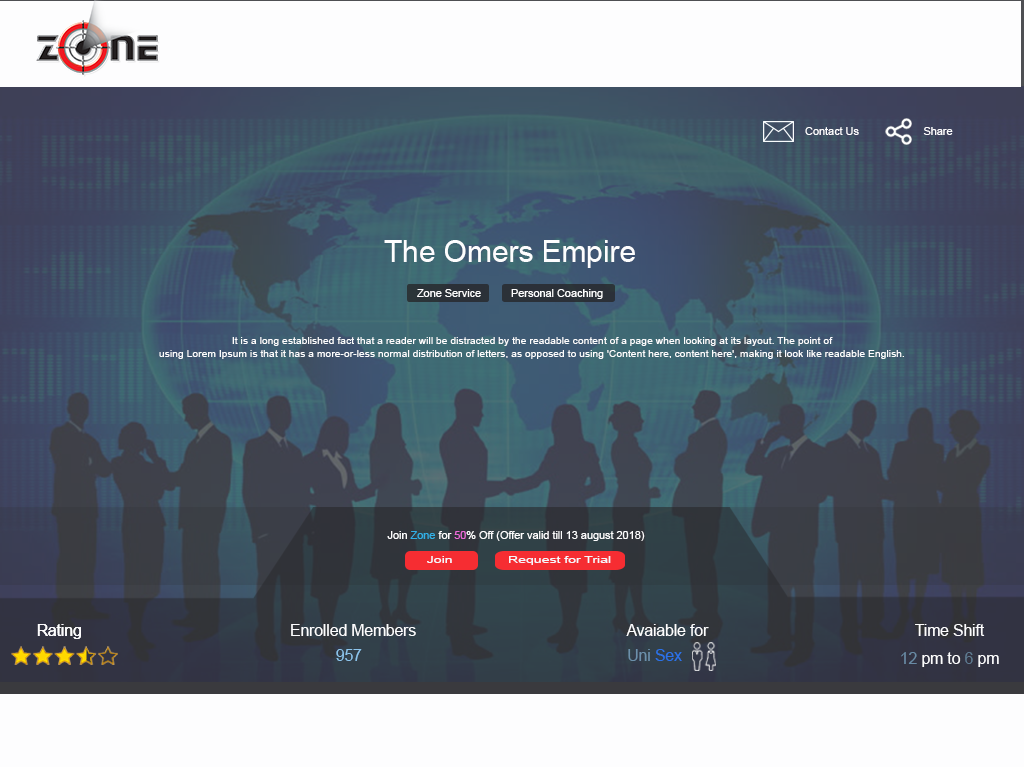
<style>
.page{position:relative;width:1024px;height:768px;background:#fdfdfe}
.page>*{position:absolute;margin:0}
.t1{font:11px "ArialMT";color:#fdfdfe}
.t2{font:29.6px "ArialMT";color:#fdfdfe}
.t3{font:10.5px "ArialMT";color:#fdfdfe}
.t4{font:11px "ArialMT";color:#31b1e7}
.t5{font:11px "ArialMT";color:#ed6bd9}
.t6{font:8.6px "ArialMT";color:#f5f6fb;scale:1.64 1}
.t7{font:16.2px "ArialMT";color:#fdfdfe;scale:0.96 1}
.t8{font:16.2px "ArialMT";color:#8dc5ec;scale:0.96 1}
.t9{font:16.2px "ArialMT";color:#6c90ab;scale:0.96 1}
.t10{font:16.2px "ArialMT";color:#2b72e8;scale:0.96 1}
.t11{font:16.2px "ArialMT";color:#698ba5;scale:0.96 1}
.t12{font:16.2px "ArialMT";color:#5f7c92;scale:0.96 1}
</style>
<div class="page">
<p class="t1" style="left:805px;top:127px;width:54px;height:8px">Contact Us</p>
<p class="t1" style="left:923px;top:127px;width:30px;height:8px">Share</p>
<p class="t2" style="left:384px;top:240px;width:251px;height:28px">The Omers Empire</p>
<p class="t1" style="left:417px;top:289px;width:64px;height:8px">Zone Service</p>
<p class="t1" style="left:511px;top:289px;width:92px;height:10px">Personal Coaching</p>
<p class="t3" style="left:159px;top:337px;width:745px;height:22px;text-align:center">It is a long established fact that a reader will be distracted by the readable content of a page when looking at its layout. The point of<br>using Lorem Ipsum is that it has a more-or-less normal distribution of letters, as opposed to using 'Content here, content here', making it look like readable English.</p>
<p class="t1" style="left:387px;top:531px;width:258px;height:10px">Join <span class="t4">Zone</span> for <span class="t5">50</span>% Off (Offer valid till 13 august 2018)</p>
<p class="t6" style="left:427px;top:556px;width:25px;height:7px">Join</p>
<p class="t6" style="left:509px;top:556px;width:102px;height:9px">Request for Trial</p>
<p class="t7" style="left:37px;top:624px;width:44px;height:15px">Rating</p>
<p class="t7" style="left:37px;top:624px;width:44px;height:15px">Rating</p>
<p class="t7" style="left:291px;top:624px;width:125px;height:12px">Enrolled Members</p>
<p class="t7" style="left:626px;top:624px;width:83px;height:12px">Avaiable for</p>
<p class="t7" style="left:915px;top:624px;width:70px;height:12px">Time Shift</p>
<p class="t8" style="left:336px;top:649px;width:26px;height:12px">957</p>
<p class="t9" style="left:628px;top:649px;width:54px;height:12px">Uni <span class="t10">Sex</span></p>
<p class="t7" style="left:901px;top:652px;width:98px;height:15px"><span class="t11">12</span> pm to <span class="t12">6</span> pm</p>
</div>
